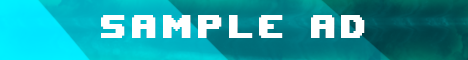
<style>
.page{position:relative;width:468px;height:60px}
.page>*{position:absolute;margin:0}
.t1{font:44.6px "UpheavalTT-BRK-";letter-spacing:0.14em;color:#ffffff;text-transform:uppercase;scale:0.93 1}
</style>
<div class="page">
<p class="t1" style="left:101px;top:15px;width:264px;height:23px">SAMPLE AD</p>
</div>
